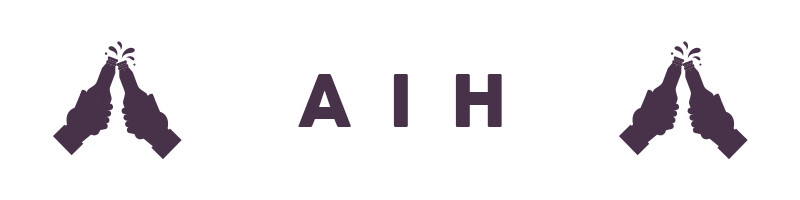
<style>
.page{position:relative;width:800px;height:200px;background:#ffffff}
.page>*{position:absolute;margin:0}
.t1{font:72px "Cocogoose";letter-spacing:0.5em;color:#48324a}
</style>
<div class="page">
<p class="t1" style="left:298px;top:74px;width:204px;height:53px">AIH</p>
</div>
